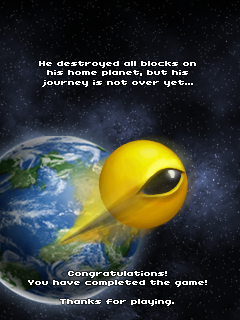
<style>
.page{position:relative;width:240px;height:320px}
.page>*{position:absolute;margin:0}
.t1{font:8px "04b11";color:#ffffff}
</style>
<div class="page">
<p class="t1" style="left:39px;top:61px;width:157px;height:26px;text-align:center">He destroyed all blocks on<br>his home planet, but his<br>journey is not over yet...</p>
<p class="t1" style="left:28px;top:271px;width:179px;height:35px;text-align:center">Congratulations!<br>You have completed the game!<br><br>Thanks for playing.</p>
</div>
